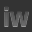
<style>
.page{position:relative;width:32px;height:32px;background:#333333}
.page>*{position:absolute;margin:0}
.t1{font:28px "HelveticaNeue-CondensedBold";color:#5d5d5d}
</style>
<div class="page">
<p class="t1" style="left:4px;top:6px;width:25px;height:20px">iw</p>
</div>
